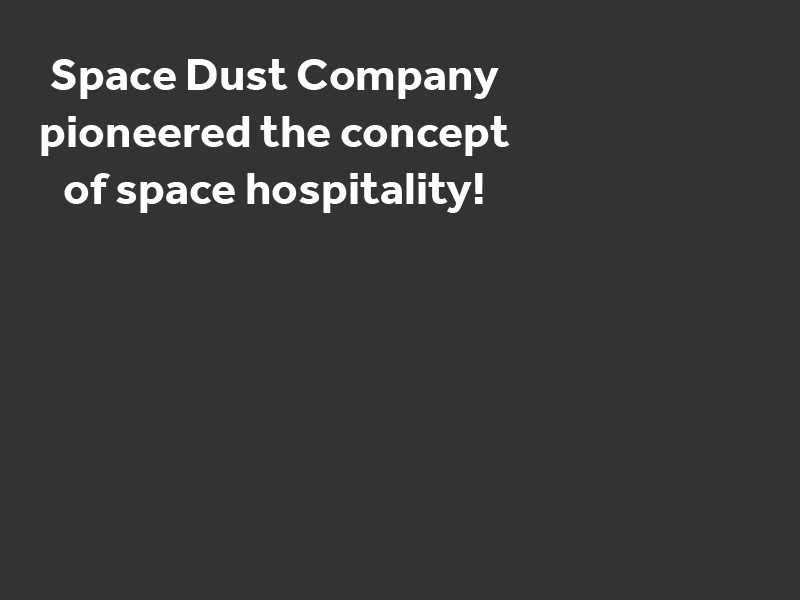
<style>
.page{position:relative;width:800px;height:600px;background:#333333}
.page>*{position:absolute;margin:0}
.t1{font:47.1px "Effra-Bold";color:#ffffff}
</style>
<div class="page">
<p class="t1" style="left:41px;top:59px;width:469px;height:154px;text-align:center">Space Dust Company<br>pioneered the concept<br>of space hospitality!</p>
</div>
